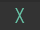
<style>
.page{position:relative;width:40px;height:30px;background:#333333}
.page>*{position:absolute;margin:0}
.t1{font:30px "Simplifica";color:#6ac5a9}
</style>
<div class="page">
<p class="t1" style="left:15px;top:8px;width:10px;height:15px">x</p>
</div>
